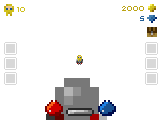
<style>
.page{position:relative;width:160px;height:120px;background:#ffffff}
.page>*{position:absolute;margin:0}
.t1{font:8px "5x5-Pixel";color:#bca414}
.t2{font:8px "5x5-Pixel";color:#d0c01c}
.t3{font:8px "5x5-Pixel";color:#246098}
</style>
<div class="page">
<p class="t1" style="left:122px;top:6px;width:22px;height:5px">2000</p>
<p class="t2" style="left:17px;top:7px;width:8px;height:5px">10</p>
<p class="t3" style="left:140px;top:16px;width:4px;height:5px">5</p>
</div>
